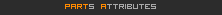
<style>
.page{position:relative;width:222px;height:15px;background:#2c2c2c}
.page>*{position:absolute;margin:0}
.t1{font:10px "VisitorTT1BRK";color:#a9a9a9}
.t2{font:10px "VisitorTT1BRK";color:#ff8a00}
</style>
<div class="page">
<p class="t1" style="left:65px;top:4px;width:91px;height:5px"><span class="t2">part</span>s<span class="t2"> a</span>ttributes</p>
</div>
